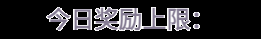
<style>
.page{position:relative;width:261px;height:39px;background:#000000}
.page>*{position:absolute;margin:0}
.t1{font:24px "WebPSD-18463539-0-Regular";color:#857c93;font-weight:bold}
</style>
<div class="page">
<p class="t1" style="left:0px;top:0px;width:261px;height:39px">今日奖励上限：</p>
</div>
